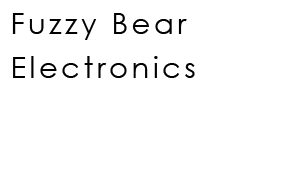
<style>
.page{position:relative;width:287px;height:180px;background:#ffffff}
.page>*{position:absolute;margin:0}
.t1{font:29px/44px "CenturyGothic";letter-spacing:0.121em;color:#000000}
</style>
<div class="page">
<p class="t1" style="left:12px;top:13px;width:183px;height:65px">Fuzzy Bear<br>Electronics</p>
</div>
